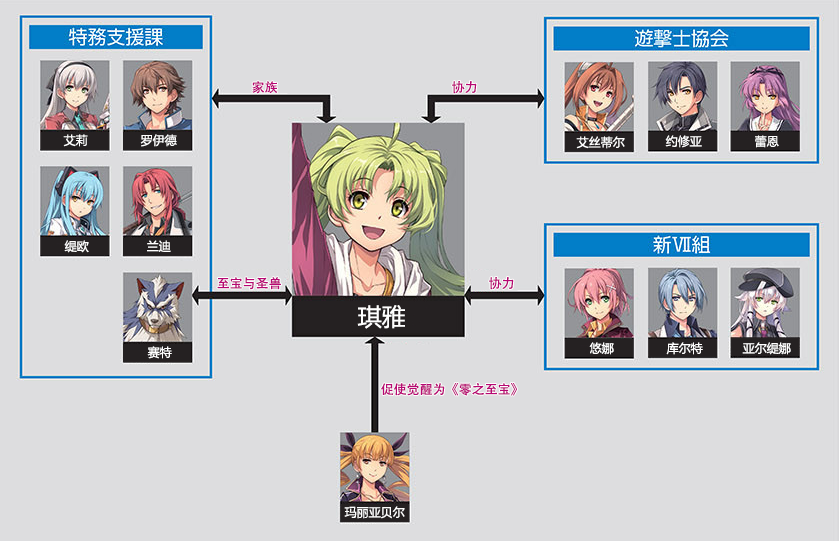
<style>
.page{position:relative;width:839px;height:541px;background:#dddddf}
.page>*{position:absolute;margin:0}
.t1{font:13px "AdobeHeitiStd-Regular";color:#b70773}
.t2{font:12px "MicrosoftYaHei";color:#ffffff}
.t3{font:24px "MicrosoftYaHei";color:#ffffff}
</style>
<div class="page">
<p class="t1" style="left:252px;top:81px;width:26px;height:13px">家族</p>
<p class="t1" style="left:452px;top:81px;width:25px;height:13px">协力</p>
<p class="t2" style="left:63px;top:134px;width:25px;height:13px">艾莉</p>
<p class="t2" style="left:140px;top:134px;width:37px;height:13px">罗伊德</p>
<p class="t2" style="left:576px;top:136px;width:49px;height:13px">艾丝蒂尔</p>
<p class="t2" style="left:665px;top:135px;width:37px;height:13px">约修亚</p>
<p class="t2" style="left:755px;top:135px;width:24px;height:13px">蕾恩</p>
<p class="t2" style="left:64px;top:240px;width:25px;height:13px">缇欧</p>
<p class="t2" style="left:147px;top:240px;width:24px;height:12px">兰迪</p>
<p class="t1" style="left:217px;top:277px;width:64px;height:13px">至宝与圣兽</p>
<p class="t1" style="left:489px;top:277px;width:25px;height:13px">协力</p>
<p class="t3" style="left:357px;top:305px;width:48px;height:24px">琪雅</p>
<p class="t2" style="left:589px;top:342px;width:25px;height:13px">悠娜</p>
<p class="t2" style="left:666px;top:342px;width:37px;height:13px">库尔特</p>
<p class="t2" style="left:742px;top:342px;width:49px;height:13px">亚尔缇娜</p>
<p class="t2" style="left:147px;top:346px;width:25px;height:13px">赛特</p>
<p class="t1" style="left:381px;top:383px;width:136px;height:13px">促使觉醒为《零之至宝》</p>
<p class="t2" style="left:344px;top:506px;width:61px;height:13px">玛丽亚贝尔</p>
</div>
